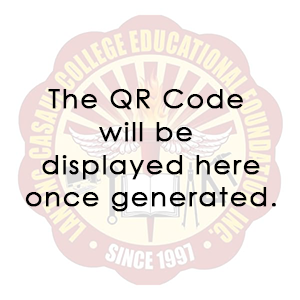
<style>
.page{position:relative;width:300px;height:300px;background:#ffffff}
.page>*{position:absolute;margin:0}
.t1{font:27.2px "CenturyGothic";letter-spacing:0.04em;color:#000000;font-weight:bold}
</style>
<div class="page">
<p class="t1" style="left:25px;top:89px;width:251px;height:123px;text-align:center">The QR Code <br>will be <br>displayed here<br>once generated.</p>
</div>
